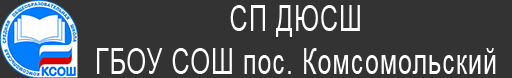
<style>
.page{position:relative;width:512px;height:78px;background:#333333}
.page>*{position:absolute;margin:0}
.t1{font:35.9px "ArialMT";letter-spacing:0.04em;color:#ffffff;scale:0.7 1}
</style>
<div class="page">
<p class="t1" style="left:97px;top:5px;width:399px;height:69px;text-align:center">СП ДЮСШ<br>ГБОУ СОШ пос. Комсомольский</p>
</div>
